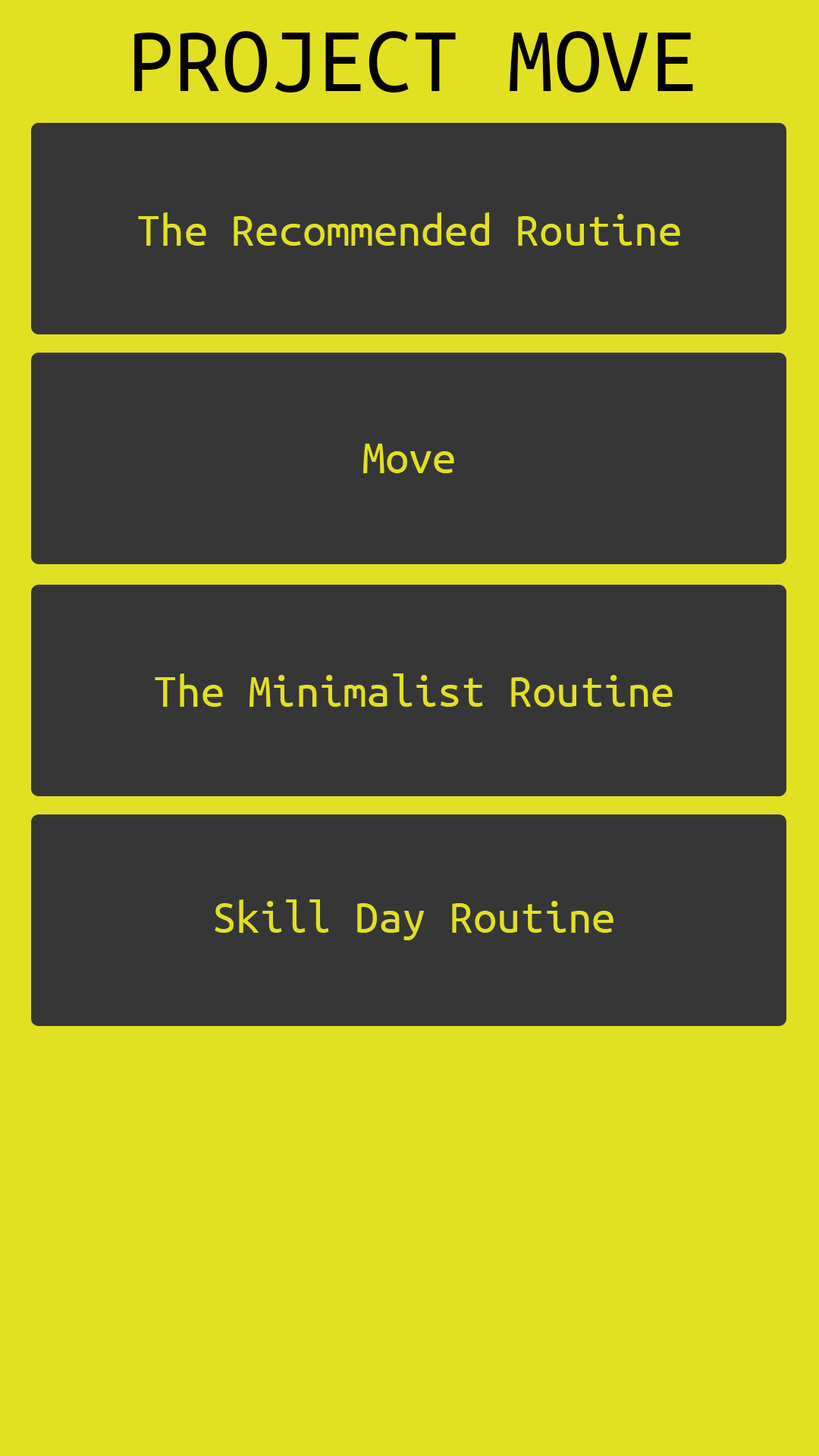
<style>
.page{position:relative;width:819px;height:1456px;background:#363636}
.page>*{position:absolute;margin:0}
.t1{font:94.8px "UbuntuMono-Regular";color:#010101}
.t2{font:47.4px "UbuntuMono-Regular";color:#e2e023}
</style>
<div class="page">
<p class="t1" style="left:134px;top:31px;width:559px;height:62px">PROJECT MOVE</p>
<p class="t2" style="left:138px;top:212px;width:542px;height:34px">The Recommended Routine</p>
<p class="t2" style="left:363px;top:444px;width:91px;height:29px">Move</p>
<p class="t2" style="left:155px;top:673px;width:518px;height:34px">The Minimalist Routine</p>
<p class="t2" style="left:215px;top:899px;width:398px;height:41px">Skill Day Routine</p>
</div>
